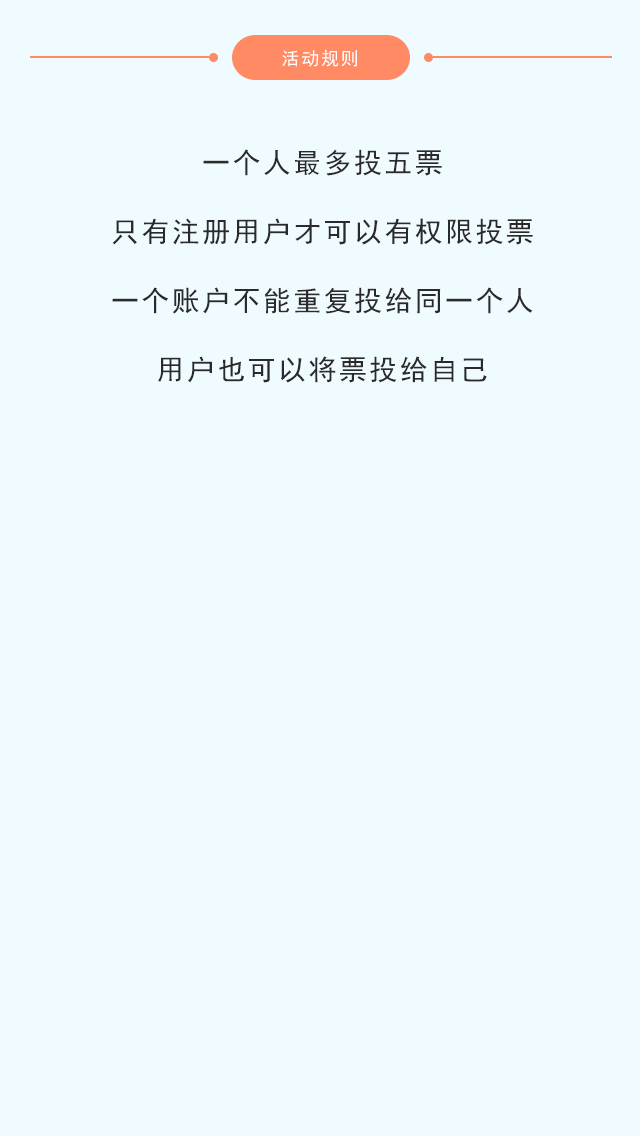
<style>
.page{position:relative;width:640px;height:1136px;background:#effbff}
.page>*{position:absolute;margin:0}
.t1{font:18px "SimHei";letter-spacing:0.1em;color:#ffffff}
.t2{font:28px/69px "SimHei";letter-spacing:0.085em;color:#2b2a2b}
</style>
<div class="page">
<p class="t1" style="left:282px;top:49px;width:75px;height:18px">活动规则</p>
<p class="t2" style="left:112px;top:149px;width:421px;height:234px;text-align:center">一个人最多投五票<br>只有注册用户才可以有权限投票<br>一个账户不能重复投给同一个人<br>用户也可以将票投给自己</p>
</div>
